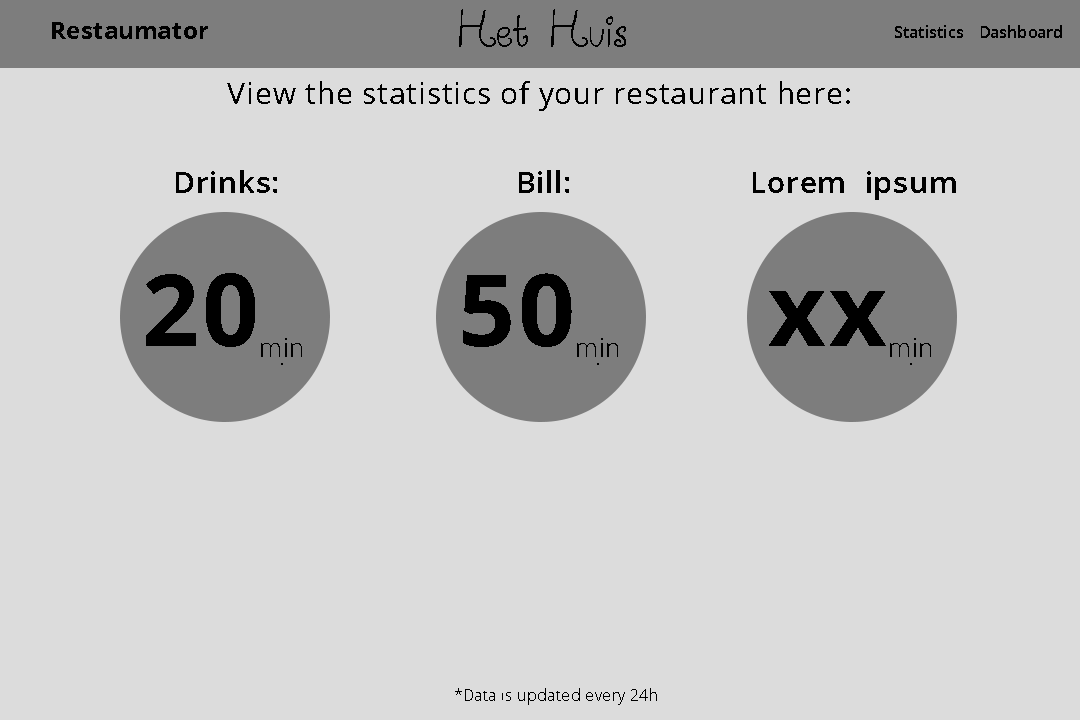
<style>
.page{position:relative;width:1080px;height:720px;background:#dcdcdc}
.page>*{position:absolute;margin:0}
.t1{font:40.1px "AirplanesintheNightSky";letter-spacing:0.005em;color:#000000}
.t2{font:24px "OpenSans-Bold";letter-spacing:0.005em;color:#000000}
.t3{font:15.9px "OpenSans-Semibold";letter-spacing:0.005em;color:#000000}
.t4{font:30px "OpenSans";letter-spacing:0.025em;color:#000000}
.t5{font:30px "OpenSans-Semibold";letter-spacing:0.025em;color:#000000}
.t6{font:100px "OpenSans-Bold";letter-spacing:0.025em;color:#000000}
.t7{font:26.1px "OpenSans-Light";letter-spacing:0.025em;color:#000000}
.t8{font:16px "OpenSans-Light";letter-spacing:0.025em;color:#000000}
</style>
<div class="page">
<p class="t1" style="left:459px;top:9px;width:167px;height:38px">Het Huis</p>
<p class="t2" style="left:52px;top:22px;width:156px;height:17px">Restaumator</p>
<p class="t3" style="left:895px;top:25px;width:68px;height:13px">Statistics</p>
<p class="t3" style="left:981px;top:25px;width:81px;height:13px">Dashboard</p>
<p class="t4" style="left:227px;top:81px;width:623px;height:30px">View the statistics of your restaurant here:</p>
<p class="t5" style="left:176px;top:170px;width:101px;height:23px">Drinks:</p>
<p class="t5" style="left:519px;top:170px;width:50px;height:23px">Bill:</p>
<p class="t5" style="left:753px;top:171px;width:203px;height:29px">Lorem  ipsum</p>
<p class="t6" style="left:146px;top:273px;width:109px;height:74px">20</p>
<p class="t6" style="left:463px;top:273px;width:109px;height:74px">50</p>
<p class="t6" style="left:769px;top:291px;width:117px;height:55px">xx</p>
<p class="t7" style="left:261px;top:338px;width:41px;height:27px">min.</p>
<p class="t7" style="left:577px;top:338px;width:41px;height:27px">min.</p>
<p class="t7" style="left:890px;top:338px;width:41px;height:27px">min.</p>
<p class="t8" style="left:455px;top:688px;width:202px;height:17px">*Data is updated every 24h</p>
</div>
